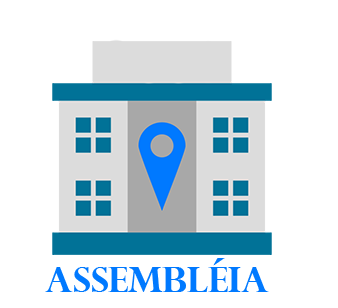
<style>
.page{position:relative;width:338px;height:308px;background:#ffffff}
.page>*{position:absolute;margin:0}
.t1{font:34.7px "PerpetuaTitlingMT-Bold";color:#0079ff}
</style>
<div class="page">
<p class="t1" style="left:45px;top:258px;width:224px;height:34px">assembléia</p>
</div>
